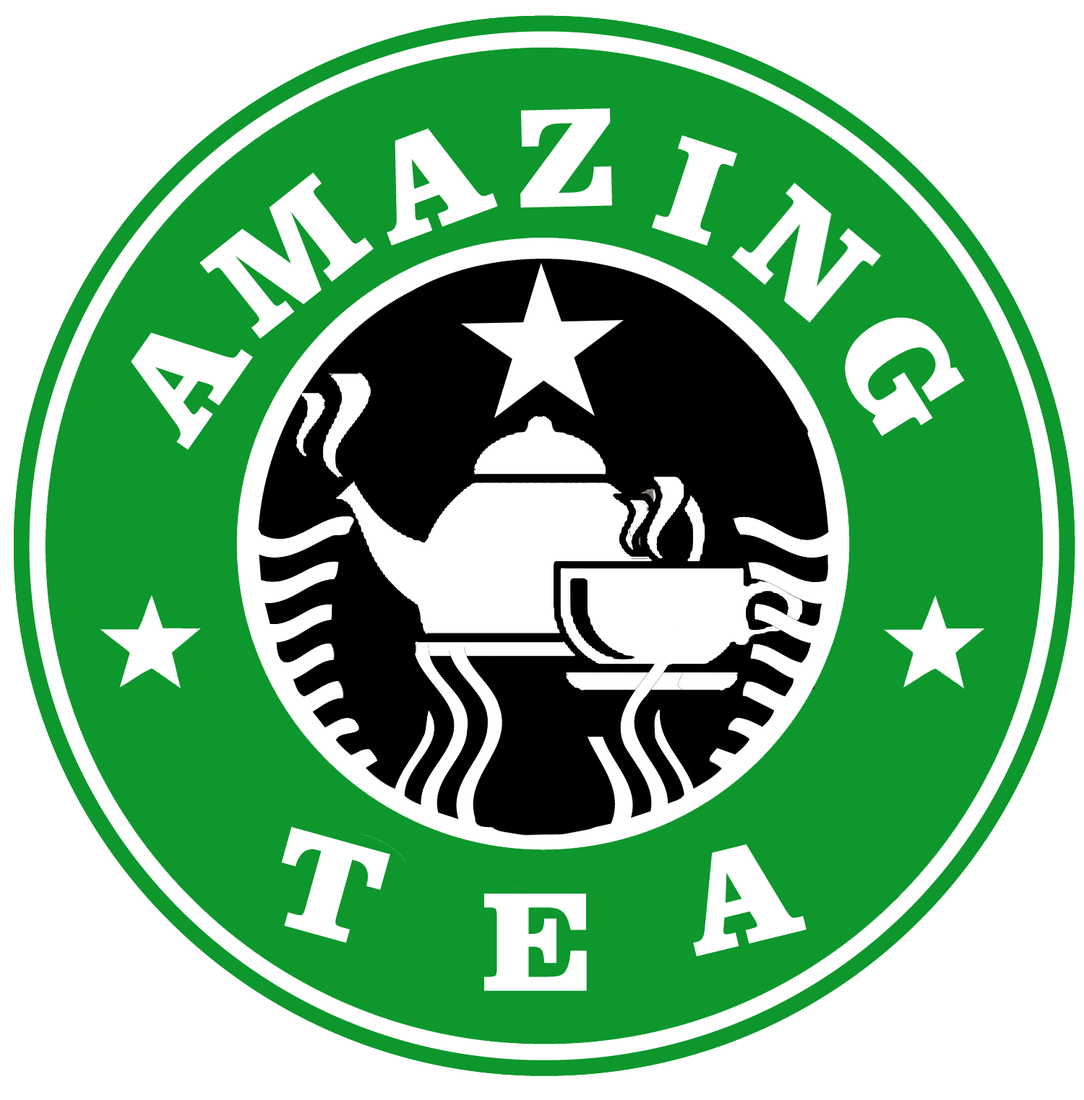
<style>
.page{position:relative;width:1084px;height:1100px;background:#ffffff}
.page>*{position:absolute;margin:0}
.t1{font:144.5px "ClarendonBT-Black";color:#ffffff}
</style>
<div class="page">
<p class="t1" style="left:520px;top:108px;width:92px;height:100px;rotate:-1deg">Z</p>
<p class="t1" style="left:387px;top:129px;width:111px;height:117px;rotate:-20deg">A</p>
<p class="t1" style="left:652px;top:135px;width:85px;height:111px;rotate:18deg">I</p>
<p class="t1" style="left:199px;top:173px;width:175px;height:166px;rotate:-38deg">M</p>
<p class="t1" style="left:731px;top:182px;width:150px;height:142px;rotate:40deg">N</p>
<p class="t1" style="left:845px;top:317px;width:120px;height:119px;rotate:58deg">G</p>
<p class="t1" style="left:131px;top:332px;width:122px;height:118px;rotate:-55deg">A</p>
<p class="t1" style="left:281px;top:827px;width:109px;height:117px;rotate:16deg">T</p>
<p class="t1" style="left:693px;top:845px;width:113px;height:112px;rotate:-14deg">A</p>
<p class="t1" style="left:484px;top:894px;width:103px;height:97px">E</p>
</div>
